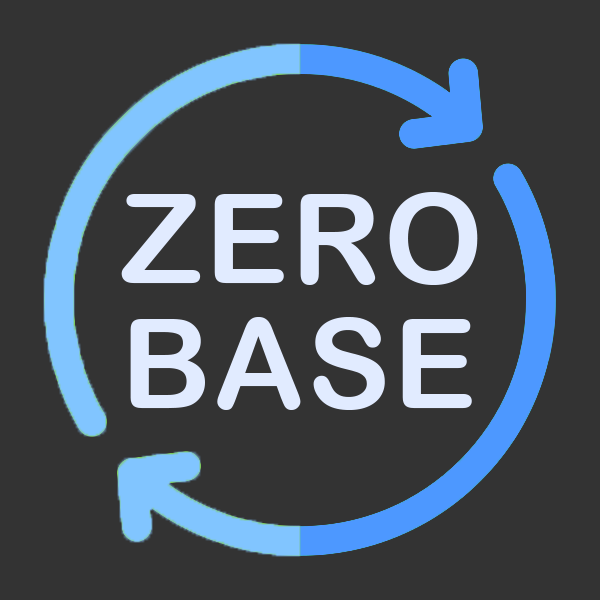
<style>
.page{position:relative;width:600px;height:600px;background:#333333}
.page>*{position:absolute;margin:0}
.t1{font:125px/125px "ArialRoundedMTBold";letter-spacing:0.025em;color:#e1ebff}
</style>
<div class="page">
<p class="t1" style="left:121px;top:192px;width:357px;height:218px">ZERO<br>BASE</p>
</div>
